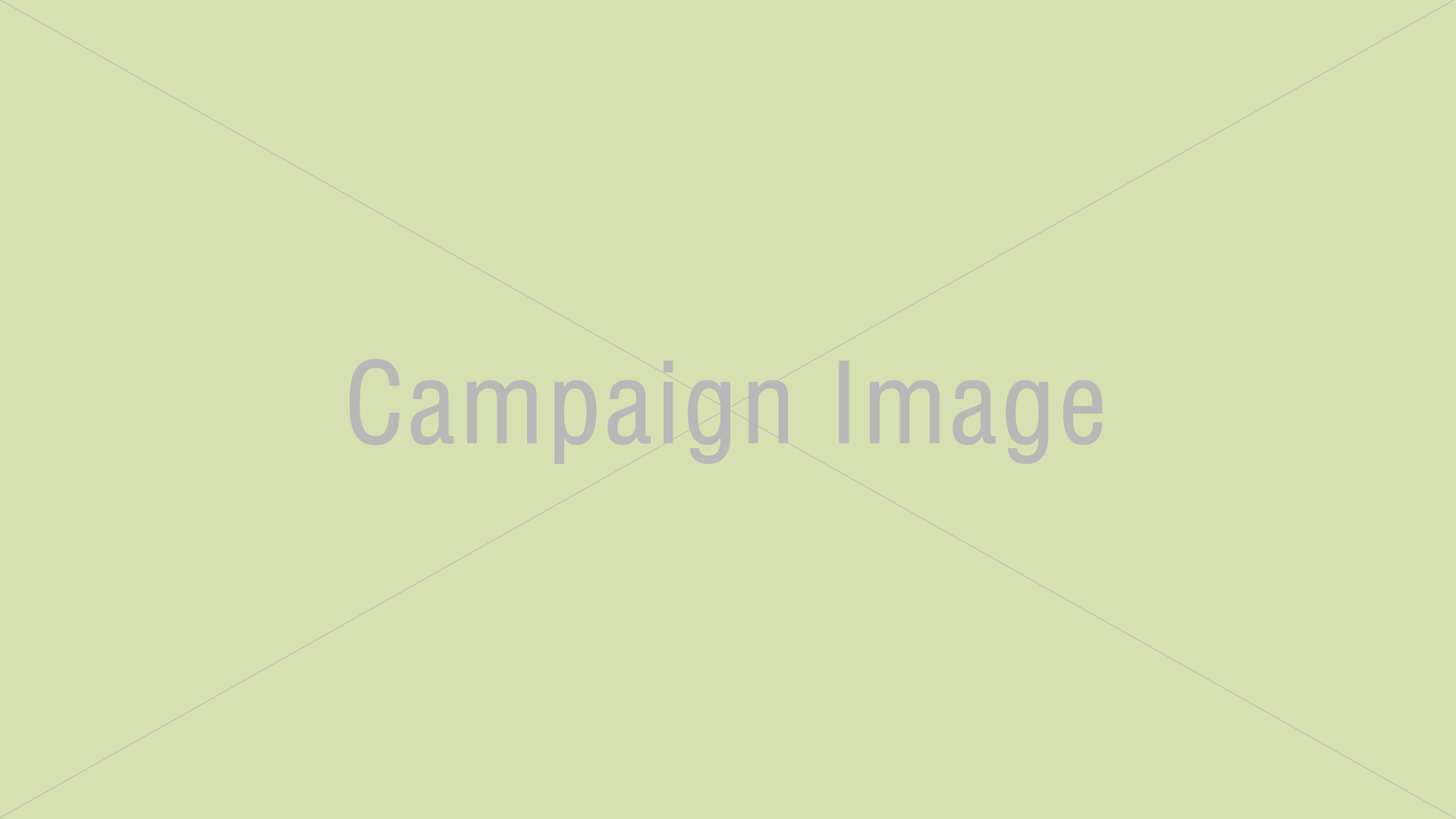
<style>
.page{position:relative;width:1456px;height:819px;background:#d7e0b1}
.page>*{position:absolute;margin:0}
.t1{font:109.2px "HelveticaLT-Condensed";color:#b8b8b8;font-weight:bold}
</style>
<div class="page">
<p class="t1" style="left:350px;top:359px;width:753px;height:105px">Campaign Image</p>
</div>
